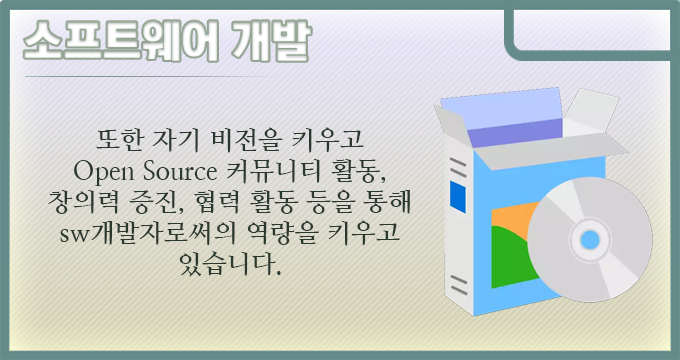
<style>
.page{position:relative;width:680px;height:360px}
.page>*{position:absolute;margin:0}
.t1{font:44px "KoreanTITGD5-R";letter-spacing:-0.01em;color:#ffffff}
.t2{font:26px "NanumMyeongjoBold";letter-spacing:-0.01em;color:#2a382e}
</style>
<div class="page">
<p class="t1" style="left:24px;top:21px;width:287px;height:40px">소프트웨어 개발</p>
<p class="t2" style="left:48px;top:127px;width:363px;height:150px;text-align:center">또한 자기 비전을 키우고 <br>Open Source 커뮤니티 활동, 창의력 증진, 협력 활동 등을 통해 <br>sw개발자로써의 역량을 키우고 있습니다.</p>
</div>
